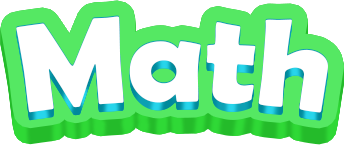
<style>
.page{position:relative;width:344px;height:145px;background:#ffffff}
.page>*{position:absolute;margin:0}
.t1{font:125px "BerlinSansFBDemi-Bold";color:#ffffff}
</style>
<div class="page">
<p class="t1" style="left:16px;top:16px;width:312px;height:97px">Math</p>
</div>
